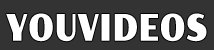
<style>
.page{position:relative;width:214px;height:50px;background:#333333}
.page>*{position:absolute;margin:0}
.t1{font:37px "PollerOne-Regular";color:#ffffff;scale:0.76 1}
</style>
<div class="page">
<p class="t1" style="left:6px;top:13px;width:201px;height:29px">YOUVIDEOS</p>
</div>
